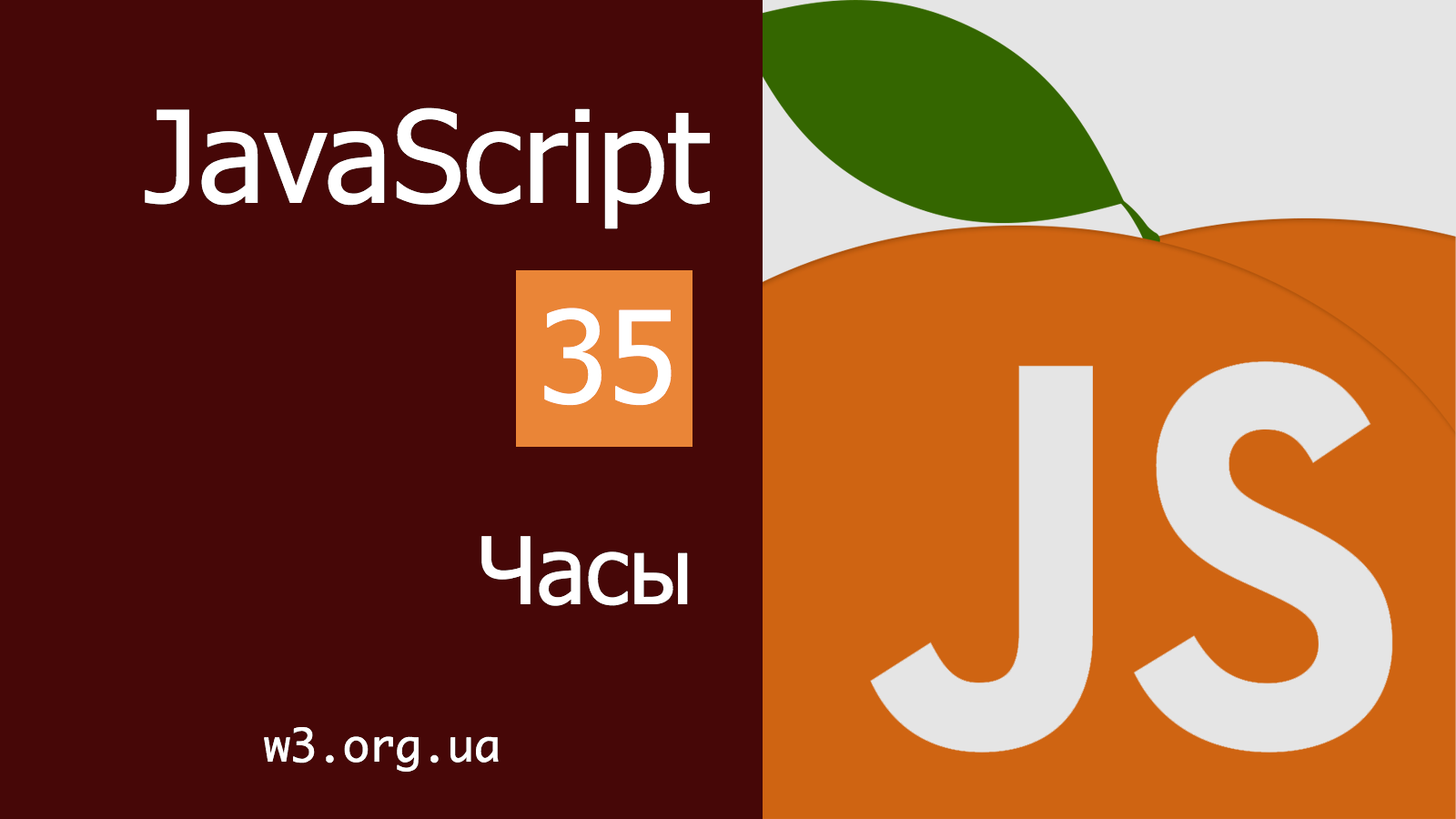
<style>
.page{position:relative;width:1456px;height:819px;background:#460707}
.page>*{position:absolute;margin:0}
.t1{font:127.4px "Tahoma";color:#ffffff}
.t2{font:92.8px "Tahoma";color:#ffffff}
.t3{font:43.7px "Ayuthaya";color:#ffffff}
</style>
<div class="page">
<p class="t1" style="left:145px;top:107px;width:565px;height:122px">JavaScript</p>
<p class="t1" style="left:544px;top:308px;width:128px;height:98px">35</p>
<p class="t2" style="left:481px;top:536px;width:207px;height:70px">Часы</p>
<p class="t3" style="left:264px;top:727px;width:235px;height:45px">w3.org.ua</p>
</div>
